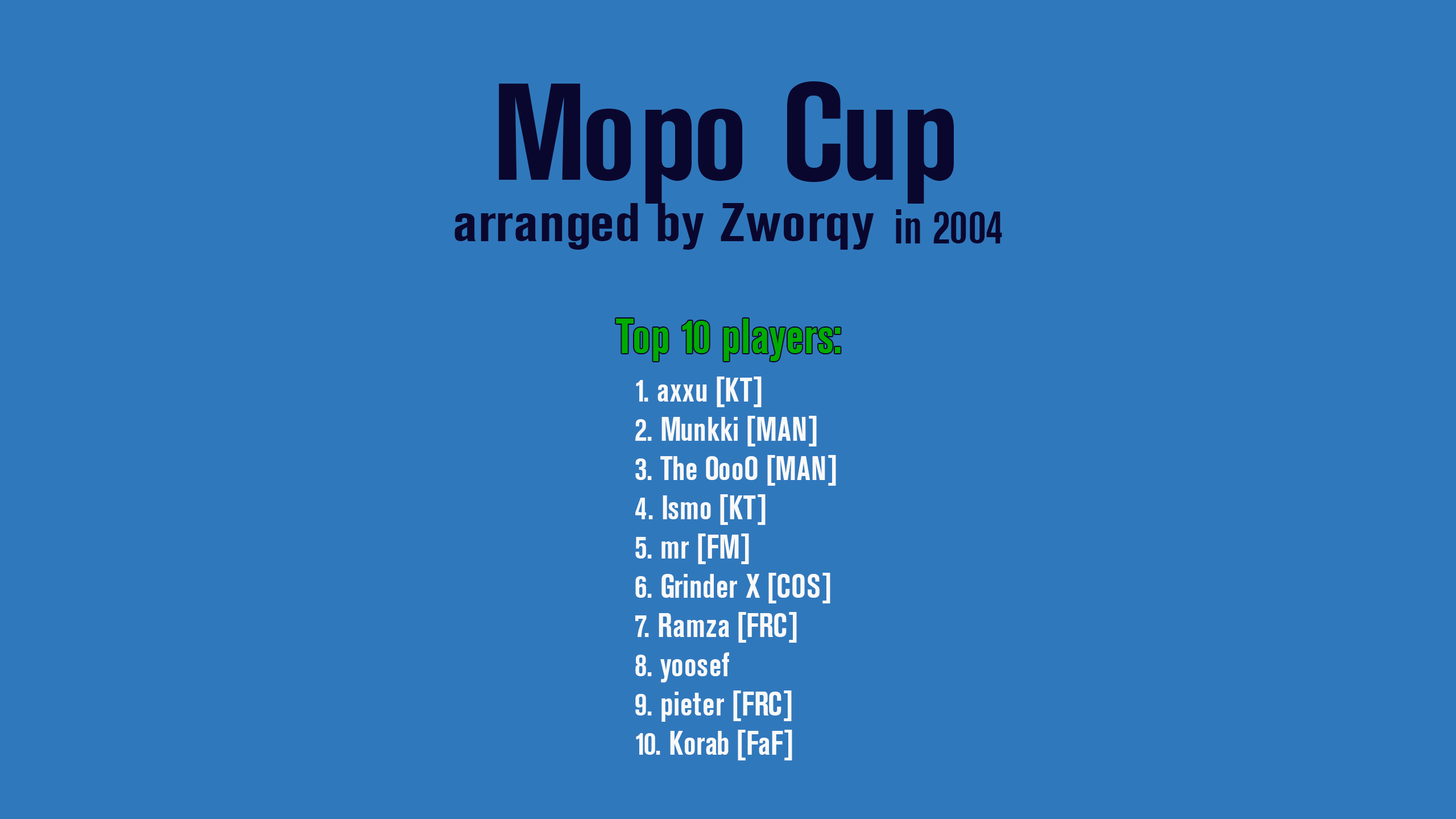
<style>
.page{position:relative;width:1456px;height:819px;background:#3078bc}
.page>*{position:absolute;margin:0}
.t1{font:136.3px "AkzidenzGroteskCn_PFL-Bold";color:#0a072e}
.t2{font:52.5px "AkzidenzGroteskCn_PFL-Bold";color:#0a072e;scale:1.17 1}
.t3{font:46.6px "AkzidenzGroteskCn_PFL-Bold";color:#0a072e;scale:0.94 1}
.t4{font:47.5px "AkzidenzGroteskCn_PFL-Bold";color:#00ac00;scale:0.94 1}
.t5{font:32.7px "AkzidenzGroteskCn_PFL-Bold";color:#f9f9f9;scale:0.94 1}
</style>
<div class="page">
<p class="t1" style="left:499px;top:81px;width:455px;height:123px">Mopo Cup</p>
<p class="t2" style="left:454px;top:203px;width:420px;height:47px">arranged by Zworqy</p>
<p class="t3" style="left:896px;top:209px;width:106px;height:34px">in 2004</p>
<p class="t4" style="left:616px;top:318px;width:225px;height:43px">Top 10 players:</p>
<p class="t5" style="left:635px;top:377px;width:201px;height:383px">1. axxu [KT]<br>2. Munkki [MAN]<br>3. The OooO [MAN]<br>4. Ismo [KT]<br>5. mr [FM]<br>6. Grinder X [COS]<br>7. Ramza [FRC]<br>8. yoosef<br>9. pieter [FRC]<br>10. Korab [FaF]</p>
</div>
